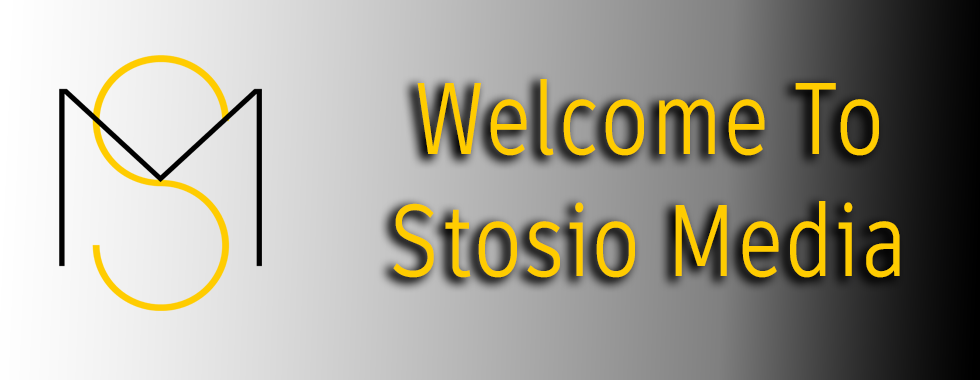
<style>
.page{position:relative;width:980px;height:380px}
.page>*{position:absolute;margin:0}
.t1{font:101.2px "ArtifaktElement-Regular";letter-spacing:0.025em;color:#ffcc00;scale:0.8 1}
</style>
<div class="page">
<p class="t1" style="left:393px;top:79px;width:507px;height:199px;text-align:center">Welcome To<br>Stosio Media</p>
</div>
